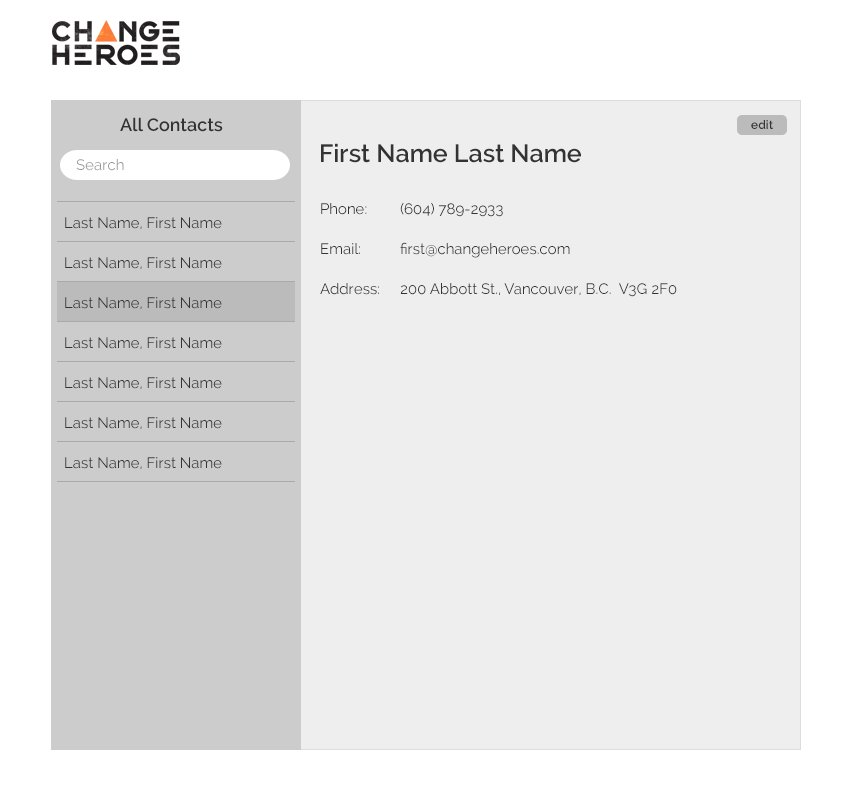
<style>
.page{position:relative;width:852px;height:792px;background:#eeeeee}
.page>*{position:absolute;margin:0}
.t1{font:18px "Raleway-SemiBold";color:#333333}
.t2{font:12px "Raleway-SemiBold";color:#333333}
.t3{font:25px "Raleway-SemiBold";color:#333333}
.t4{font:15px "Raleway-Regular";color:#999999}
.t5{font:15px/40px "Raleway-Regular";color:#333333}
.t6{font:15px "Raleway-Regular";color:#333333}
</style>
<div class="page">
<p class="t1" style="left:120px;top:117px;width:103px;height:15px">All Contacts</p>
<p class="t2" style="left:751px;top:120px;width:22px;height:9px">edit</p>
<p class="t3" style="left:321px;top:143px;width:260px;height:20px">First Name Last Name</p>
<p class="t4" style="left:76px;top:159px;width:48px;height:12px">Search</p>
<p class="t5" style="left:320px;top:203px;width:59px;height:92px">Phone:<br>Email:<br>Address:</p>
<p class="t5" style="left:400px;top:202px;width:277px;height:95px">(604) 789-2933<br>first@changeheroes.com<br>200 Abbott St., Vancouver, B.C.  V3G 2F0</p>
<p class="t6" style="left:65px;top:217px;width:157px;height:12px">Last Name, First Name</p>
<p class="t6" style="left:65px;top:257px;width:157px;height:12px">Last Name, First Name</p>
<p class="t6" style="left:65px;top:297px;width:157px;height:12px">Last Name, First Name</p>
<p class="t6" style="left:65px;top:337px;width:157px;height:12px">Last Name, First Name</p>
<p class="t6" style="left:65px;top:377px;width:157px;height:12px">Last Name, First Name</p>
<p class="t6" style="left:65px;top:417px;width:157px;height:12px">Last Name, First Name</p>
<p class="t6" style="left:65px;top:457px;width:157px;height:12px">Last Name, First Name</p>
</div>
